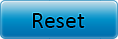
<style>
.page{position:relative;width:118px;height:39px}
.page>*{position:absolute;margin:0}
.t1{font:24px "Calibri";color:#000000}
</style>
<div class="page">
<p class="t1" style="left:32px;top:13px;width:53px;height:15px">Reset</p>
</div>
